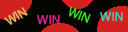
<style>
.page{position:relative;width:128px;height:32px;background:#050500}
.page>*{position:absolute;margin:0}
.t1{font:13.3px "MyriadPro-Regular";color:#3ae01f}
.t2{font:13.3px "MyriadPro-Regular";color:#d9c465}
.t3{font:13.3px "MyriadPro-Regular";color:#e01f90}
.t4{font:13.3px "MyriadPro-Regular";color:#26cfbd}
</style>
<div class="page">
<p class="t1" style="left:69px;top:6px;width:22px;height:17px;rotate:21deg">WIN</p>
<p class="t2" style="left:4px;top:7px;width:24px;height:18px;rotate:-33deg">WIN</p>
<p class="t3" style="left:37px;top:15px;width:23px;height:9px">WIN</p>
<p class="t4" style="left:100px;top:12px;width:23px;height:9px">WIN</p>
</div>
